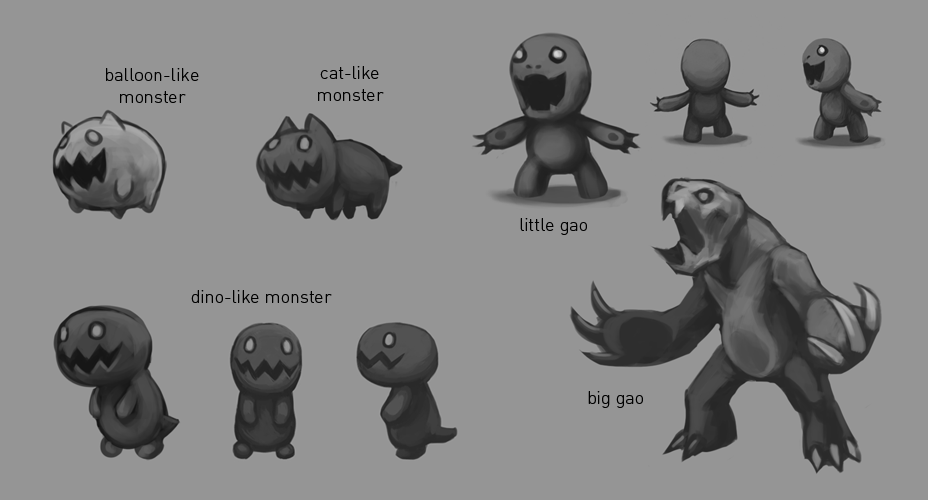
<style>
.page{position:relative;width:928px;height:500px;background:#959595}
.page>*{position:absolute;margin:0}
.t1{font:18px "DINPro-Light";color:#000000}
</style>
<div class="page">
<p class="t1" style="left:106px;top:68px;width:93px;height:35px;text-align:center">balloon-like<br>monster</p>
<p class="t1" style="left:318px;top:66px;width:66px;height:35px;text-align:center">cat-like<br>monster</p>
<p class="t1" style="left:520px;top:218px;width:67px;height:17px">little gao</p>
<p class="t1" style="left:191px;top:290px;width:141px;height:13px">dino-like monster</p>
<p class="t1" style="left:588px;top:391px;width:55px;height:17px">big gao</p>
</div>
